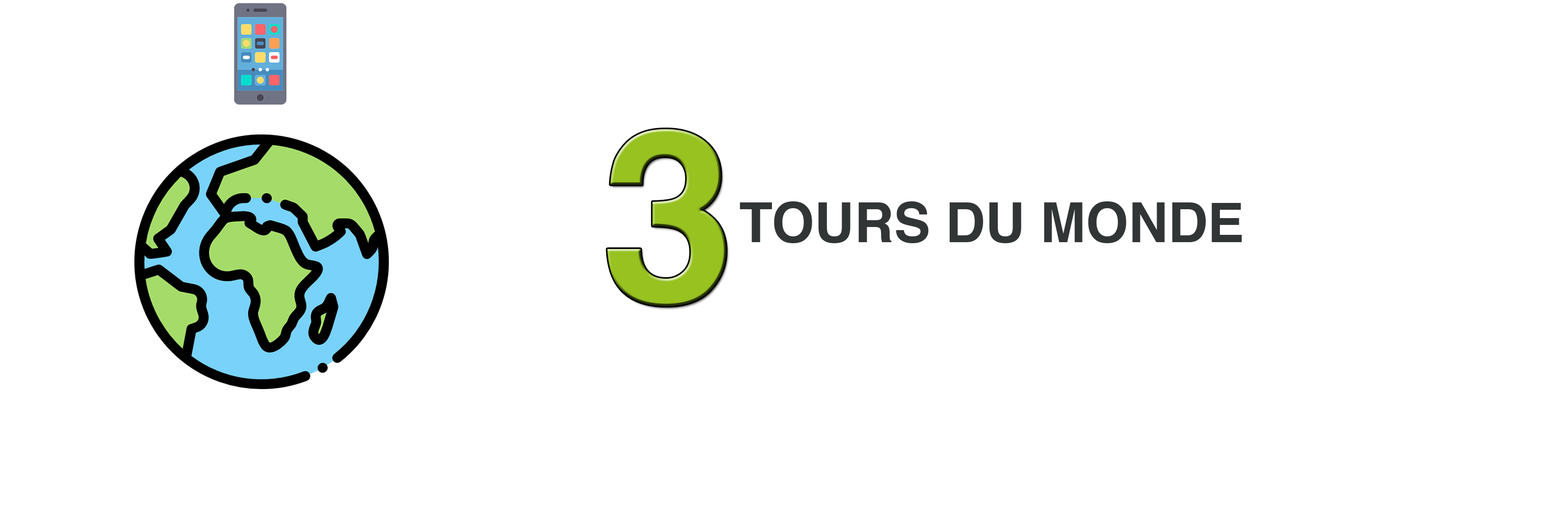
<style>
.page{position:relative;width:1568px;height:523px;background:#ffffff}
.page>*{position:absolute;margin:0}
.t1{font:242px "Helvetica-Bold";color:#97c220}
.t2{font:54.9px "Helvetica-Bold";color:#323536}
</style>
<div class="page">
<p class="t1" style="left:607px;top:129px;width:119px;height:177px">3</p>
<p class="t2" style="left:740px;top:201px;width:502px;height:42px">TOURS DU MONDE</p>
</div>
